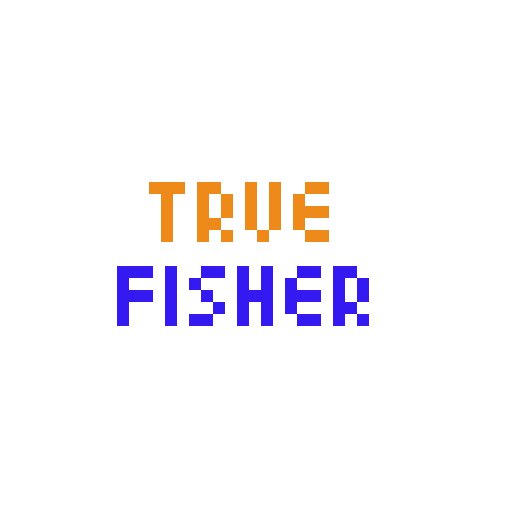
<style>
.page{position:relative;width:512px;height:512px;background:#ffffff}
.page>*{position:absolute;margin:0}
.t1{font:96px "04b24";color:#ed8a19}
.t2{font:96px "04b24";color:#3519f1}
</style>
<div class="page">
<p class="t1" style="left:149px;top:182px;width:180px;height:60px">True</p>
<p class="t2" style="left:117px;top:266px;width:252px;height:60px">Fisher</p>
</div>
